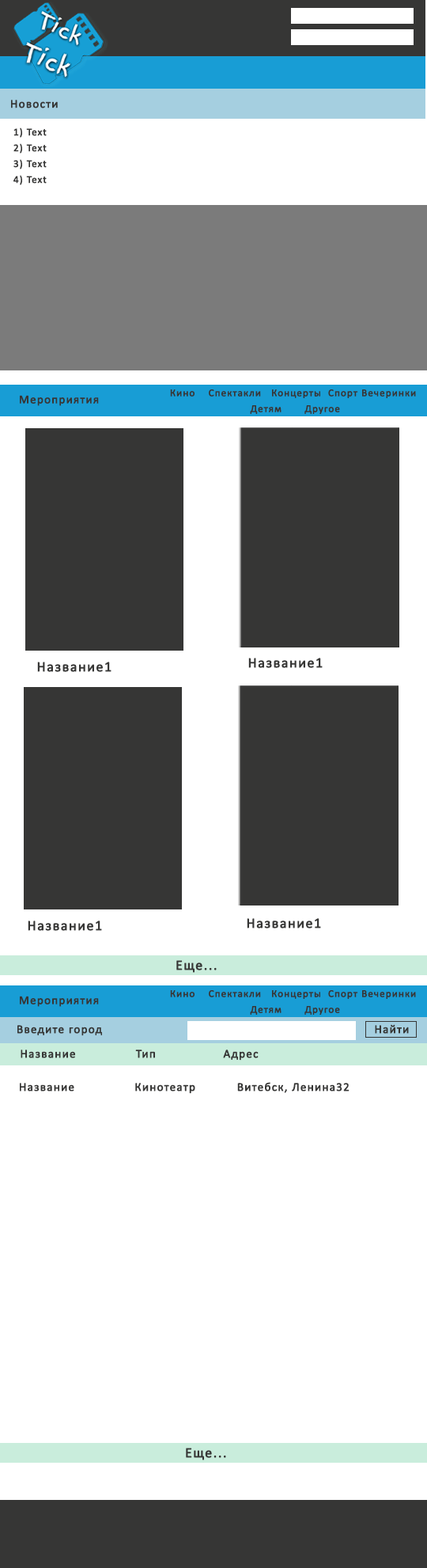
<style>
.page{position:relative;width:427px;height:1568px;background:#ffffff}
.page>*{position:absolute;margin:0}
.t1{font:11.9px "Calibri";letter-spacing:0.06em;color:#363635;font-weight:bold}
.t2{font:10.3px/15.8px "Calibri";letter-spacing:0.06em;color:#363635;font-weight:bold}
.t3{font:14.2px "Calibri";letter-spacing:0.06em;color:#363635;font-weight:bold}
</style>
<div class="page">
<p class="t1" style="left:11px;top:100px;width:47px;height:8px">Новости</p>
<p class="t2" style="left:13px;top:127px;width:34px;height:58px">1) Text<br>2) Text<br>3) Text<br>4) Text</p>
<p class="t2" style="left:170px;top:389px;width:246px;height:25px">Кино    Спектакли   Концерты  Спорт Вечеринки<br>                         Детям       Другое</p>
<p class="t1" style="left:20px;top:395px;width:79px;height:11px">Мероприятия</p>
<p class="t3" style="left:37px;top:662px;width:75px;height:10px">Название1</p>
<p class="t3" style="left:249px;top:658px;width:74px;height:10px">Название1</p>
<p class="t3" style="left:28px;top:921px;width:74px;height:10px">Название1</p>
<p class="t3" style="left:247px;top:918px;width:74px;height:10px">Название1</p>
<p class="t3" style="left:177px;top:960px;width:40px;height:13px">Еще...</p>
<p class="t1" style="left:20px;top:996px;width:79px;height:11px">Мероприятия</p>
<p class="t2" style="left:170px;top:990px;width:246px;height:25px">Кино    Спектакли   Концерты  Спорт Вечеринки<br>                         Детям       Другое</p>
<p class="t1" style="left:17px;top:1025px;width:85px;height:11px">Введите город</p>
<p class="t1" style="left:375px;top:1024px;width:34px;height:10px">Найти</p>
<p class="t1" style="left:21px;top:1050px;width:238px;height:11px">Название                Тип                  Адрес</p>
<p class="t1" style="left:20px;top:1082px;width:330px;height:12px">Название                Кинотеатр           Витебск, Ленина32</p>
<p class="t3" style="left:186px;top:1448px;width:40px;height:12px">Еще...</p>
</div>
